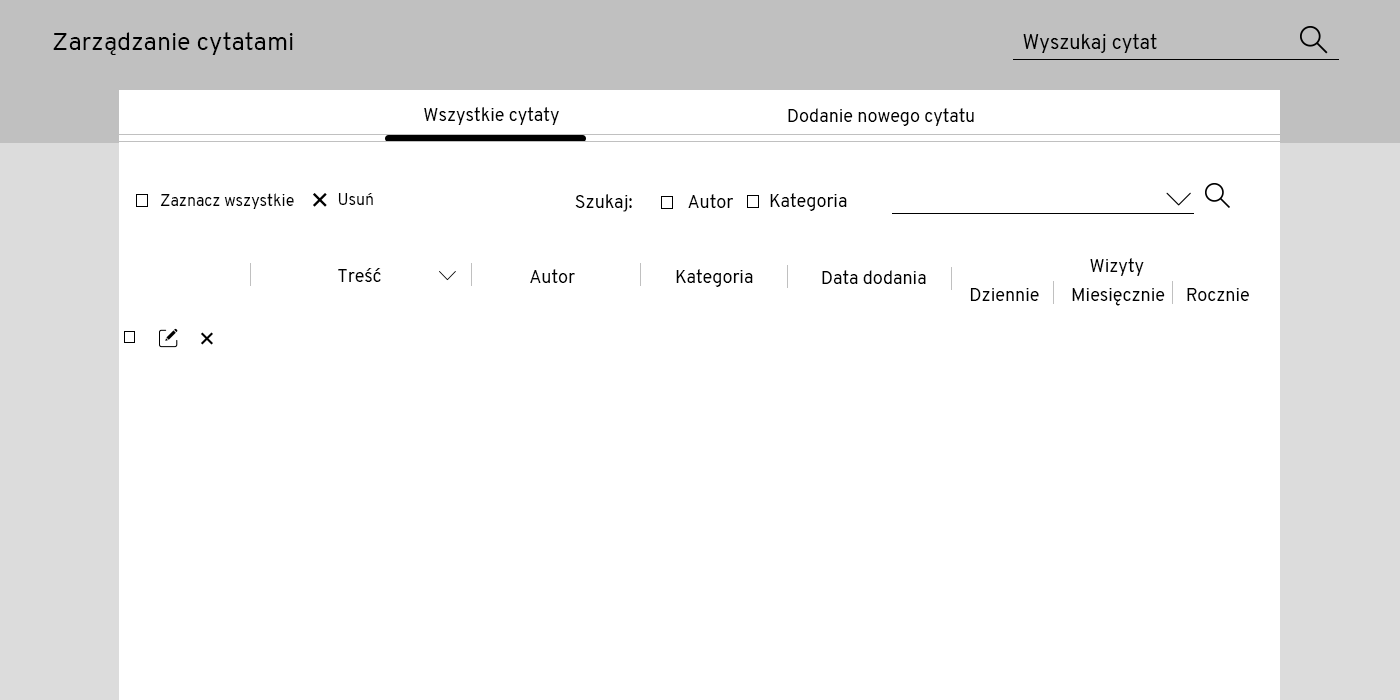
<style>
.page{position:relative;width:1400px;height:700px;background:#ffffff}
.page>*{position:absolute;margin:0}
.t1{font:25px "Overpass-Regular";color:#000000}
.t2{font:20px "Overpass-Regular";color:#000000}
.t3{font:18px "Overpass-Regular";color:#000000}
.t4{font:16px "Overpass-Regular";color:#000000}
</style>
<div class="page">
<p class="t1" style="left:53px;top:32px;width:240px;height:23px">Zarządzanie cytatami</p>
<p class="t2" style="left:1023px;top:33px;width:134px;height:20px">Wyszukaj cytat</p>
<p class="t3" style="left:424px;top:107px;width:135px;height:18px">Wszystkie cytaty</p>
<p class="t3" style="left:788px;top:108px;width:186px;height:18px">Dodanie nowego cytatu</p>
<p class="t4" style="left:160px;top:193px;width:134px;height:16px">Zaznacz wszystkie</p>
<p class="t4" style="left:338px;top:193px;width:35px;height:12px">Usuń</p>
<p class="t3" style="left:575px;top:194px;width:57px;height:18px">Szukaj:</p>
<p class="t3" style="left:688px;top:194px;width:45px;height:14px">Autor</p>
<p class="t3" style="left:770px;top:193px;width:77px;height:18px">Kategoria</p>
<p class="t3" style="left:338px;top:268px;width:43px;height:14px">Treść</p>
<p class="t3" style="left:530px;top:269px;width:45px;height:14px">Autor</p>
<p class="t3" style="left:676px;top:269px;width:77px;height:18px;text-align:center">Kategoria<br>vv</p>
<p class="t3" style="left:822px;top:270px;width:104px;height:14px">Data dodania</p>
<p class="t3" style="left:1090px;top:258px;width:54px;height:18px">Wizyty</p>
<p class="t3" style="left:970px;top:288px;width:69px;height:13px">Dziennie</p>
<p class="t3" style="left:1072px;top:288px;width:93px;height:18px">Miesięcznie</p>
<p class="t3" style="left:1187px;top:288px;width:62px;height:13px">Rocznie</p>
</div>
